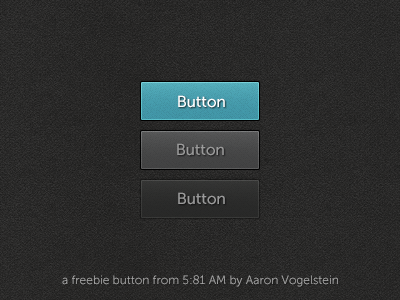
<style>
.page{position:relative;width:400px;height:300px}
.page>*{position:absolute;margin:0}
.t1{font:16px "MuseoSans-500";letter-spacing:-0.02em;color:#ffffff}
.t2{font:16px "MuseoSans-500";letter-spacing:-0.02em;color:#9a9a9a}
.t3{font:12px "MuseoSans-300";color:#aaaaaa}
</style>
<div class="page">
<p class="t1" style="left:178px;top:95px;width:47px;height:13px">Button</p>
<p class="t2" style="left:177px;top:143px;width:47px;height:13px">Button</p>
<p class="t2" style="left:178px;top:192px;width:47px;height:13px">Button</p>
<p class="t3" style="left:62px;top:275px;width:276px;height:12px">a freebie button from 5:81 AM by Aaron Vogelstein</p>
</div>
